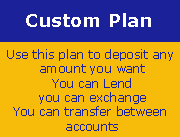
<style>
.page{position:relative;width:180px;height:137px;background:#f7bc0a}
.page>*{position:absolute;margin:0}
.t1{font:18px "Verdana-Bold";color:#ffffff}
.t2{font:12px "Verdana";color:#1b2199}
</style>
<div class="page">
<p class="t1" style="left:26px;top:13px;width:125px;height:14px">Custom Plan</p>
<p class="t2" style="left:7px;top:49px;width:166px;height:82px;text-align:center">Use this plan to deposit any <br>amount you want<br>You can Lend<br>you can exchange<br>You can transfer between <br>accounts</p>
</div>
